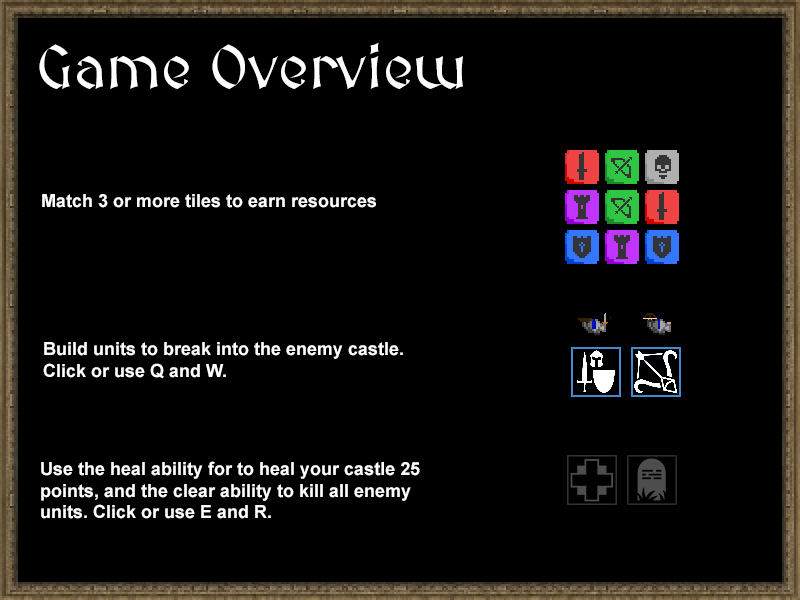
<style>
.page{position:relative;width:800px;height:600px;background:#000000}
.page>*{position:absolute;margin:0}
.t1{font:60px "MedievalSharp";color:#ffffff}
.t2{font:18px "Arial-BoldMT";color:#ffffff}
</style>
<div class="page">
<p class="t1" style="left:39px;top:42px;width:424px;height:47px">Game Overview</p>
<p class="t2" style="left:42px;top:194px;width:334px;height:14px">Match 3 or more tiles to earn resources</p>
<p class="t2" style="left:43px;top:342px;width:360px;height:37px">Build units to break into the enemy castle.<br>Click or use Q and W.</p>
<p class="t2" style="left:41px;top:461px;width:379px;height:58px">Use the heal ability for to heal your castle 25 <br>points, and the clear ability to kill all enemy <br>units. Click or use E and R.</p>
</div>
